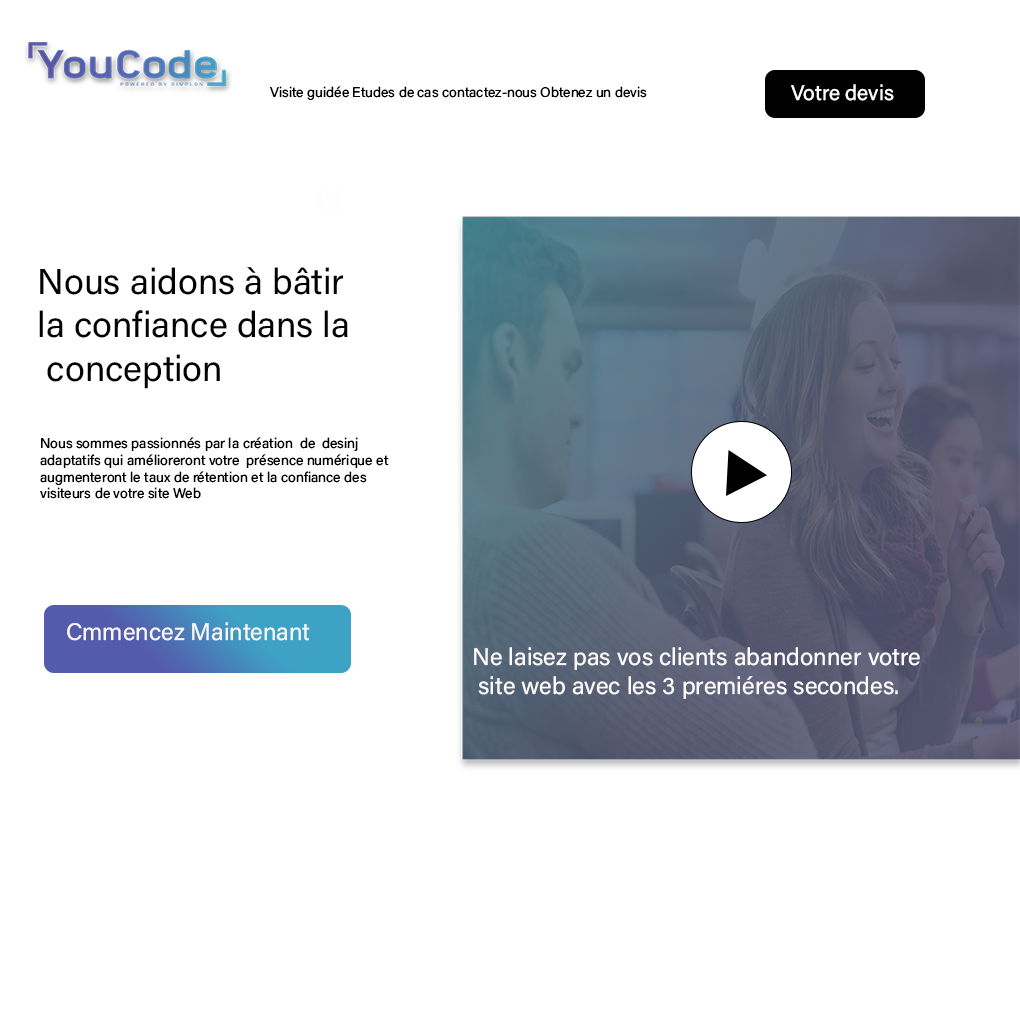
<style>
.page{position:relative;width:1020px;height:1020px;background:#ffffff}
.page>*{position:absolute;margin:0}
.t1{font:14px "AcuminConcept-Regular";color:#010000}
.t2{font:21.1px "AcuminConcept-Regular";color:#fdfdfd}
.t3{font:36px "AcuminConcept-Regular";color:#030000}
.t4{font:14px "AcuminConcept-Regular";color:#030000}
.t5{font:24px "AcuminConcept-Regular";color:#f9f5f5}
.t6{font:24px "AcuminConcept-Regular";color:#fcfafa}
</style>
<div class="page">
<p class="t1" style="left:270px;top:86px;width:377px;height:14px">Visite guidée Etudes de cas contactez-nous Obtenez un devis</p>
<p class="t2" style="left:791px;top:84px;width:103px;height:17px">Votre devis</p>
<p class="t3" style="left:39px;top:267px;width:309px;height:122px">Nous aidons à bâtir <br>la confiance dans la<br> conception</p>
<p class="t4" style="left:40px;top:437px;width:349px;height:62px">Nous sommes passionnés par la création  de  desinj <br>adaptatifs qui amélioreront votre  présence numérique et <br>augmenteront le taux de rétention et la confiance des <br>visiteurs de votre site Web</p>
<p class="t5" style="left:67px;top:622px;width:243px;height:19px">Cmmencez Maintenant</p>
<p class="t6" style="left:474px;top:647px;width:446px;height:52px">Ne laisez pas vos clients abandonner votre<br> site web avec les 3 premiéres secondes.</p>
</div>
